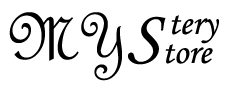
<style>
.page{position:relative;width:227px;height:91px;background:#ffffff}
.page>*{position:absolute;margin:0}
.t1{font:72px "FrenchScriptMT";color:#000000}
.t2{font:72px "MonotypeCorsiva";color:#000000}
.t3{font:36px "MonotypeCorsiva";color:#000000}
</style>
<div class="page">
<p class="t1" style="left:9px;top:12px;width:157px;height:69px">MY<span class="t2">S</span></p>
<p class="t3" style="left:171px;top:15px;width:48px;height:29px">tery</p>
<p class="t3" style="left:165px;top:44px;width:48px;height:20px">tore</p>
</div>
